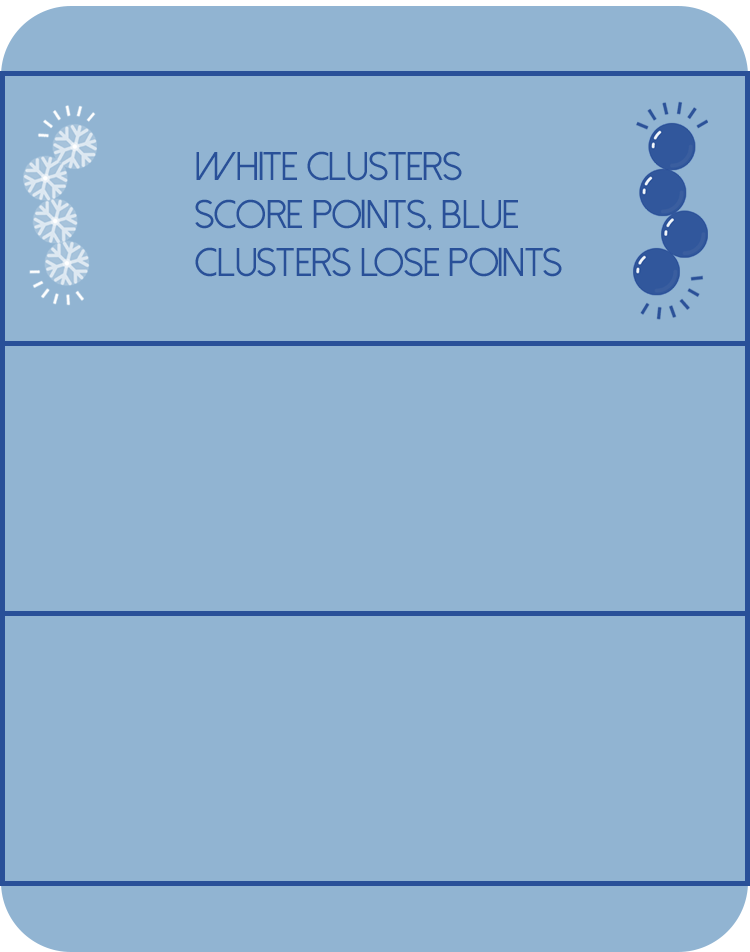
<style>
.page{position:relative;width:750px;height:952px;background:#91b4d2}
.page>*{position:absolute;margin:0}
.t1{font:40px "DolceVita";color:#295098}
</style>
<div class="page">
<p class="t1" style="left:195px;top:151px;width:367px;height:126px">WHITE CLUSTERS<br>SCORE POINTS, BLUE<br>CLUSTERS LOSE POINTS</p>
</div>
